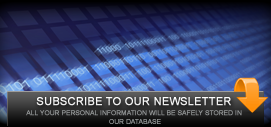
<style>
.page{position:relative;width:271px;height:127px}
.page>*{position:absolute;margin:0}
.t1{font:11px "ArialMT";color:#ffffff;font-weight:bold}
.t2{font:6.5px/3px "ArialMT";color:#949798;font-weight:bold}
</style>
<div class="page">
<p class="t1" style="left:36px;top:97px;width:195px;height:9px">SUBSCRIBE TO OUR NEWSLETTER</p>
<p class="t2" style="left:26px;top:110px;width:216px;height:14px;text-align:center">ALL YOUR PERSONAL INFORMATION WILL BE SAFELY STORED IN <br>OUR DATABASE</p>
</div>
